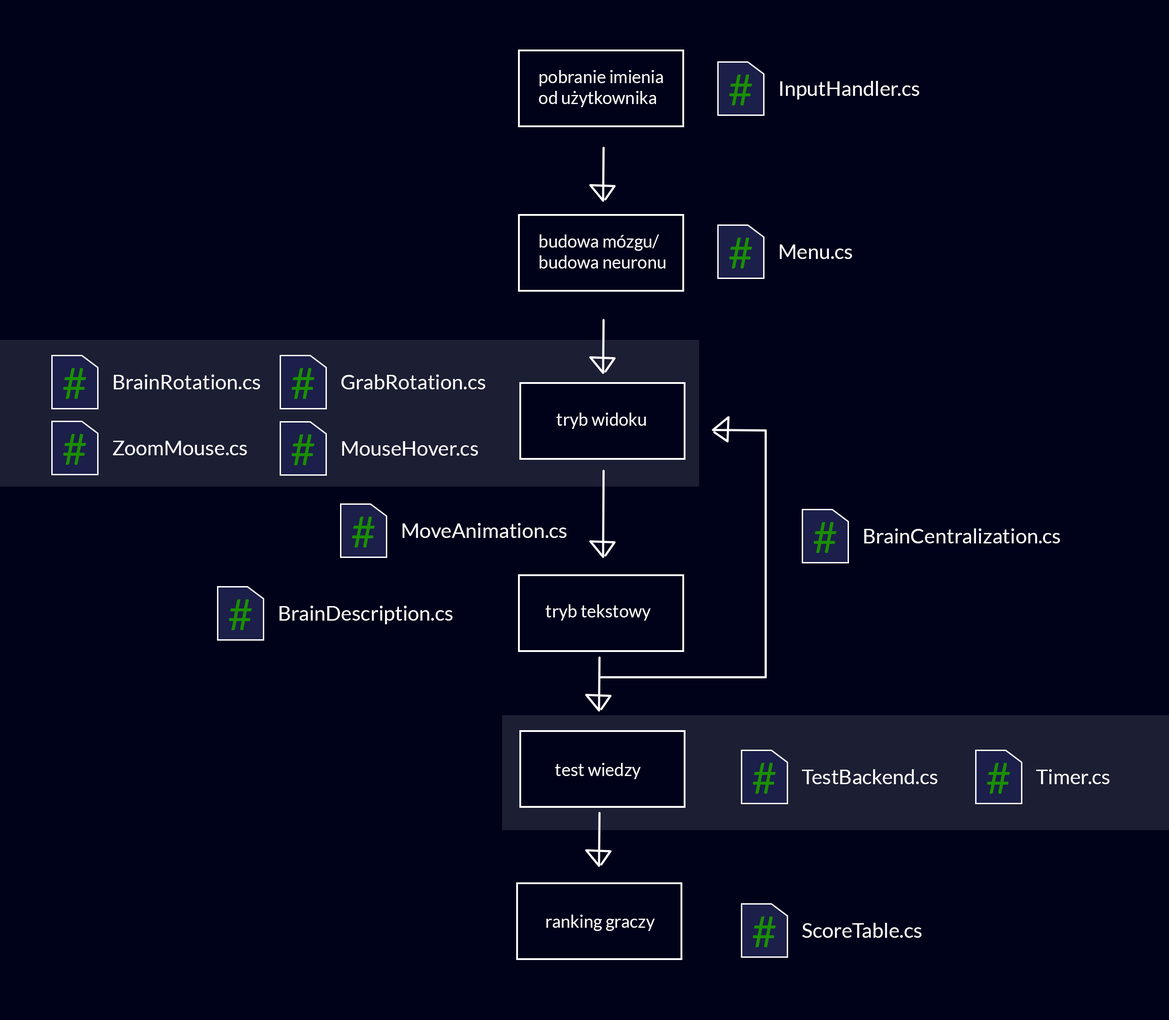
<style>
.page{position:relative;width:1169px;height:1020px;background:#00021a}
.page>*{position:absolute;margin:0}
.t1{font:17.3px "Lato-Regular";color:#ffffff}
.t2{font:43.1px "Lato-Regular";color:#1b8f00}
.t3{font:20.4px "Lato-Regular";color:#ffffff}
</style>
<div class="page">
<p class="t1" style="left:539px;top:70px;width:124px;height:37px">pobranie imienia<br>od użytkownika</p>
<p class="t2" style="left:729px;top:74px;width:24px;height:31px">#</p>
<p class="t3" style="left:780px;top:81px;width:140px;height:18px">InputHandler.cs</p>
<p class="t1" style="left:540px;top:234px;width:126px;height:34px">budowa mózgu/<br>budowa neuronu</p>
<p class="t2" style="left:729px;top:238px;width:24px;height:30px">#</p>
<p class="t3" style="left:780px;top:244px;width:72px;height:15px">Menu.cs</p>
<p class="t2" style="left:63px;top:368px;width:23px;height:31px">#</p>
<p class="t3" style="left:114px;top:374px;width:146px;height:15px">BrainRotation.cs</p>
<p class="t2" style="left:292px;top:368px;width:23px;height:31px">#</p>
<p class="t3" style="left:342px;top:374px;width:144px;height:15px">GrabRotation.cs</p>
<p class="t1" style="left:556px;top:412px;width:90px;height:17px">tryb widoku</p>
<p class="t2" style="left:63px;top:434px;width:23px;height:31px">#</p>
<p class="t2" style="left:292px;top:434px;width:23px;height:31px">#</p>
<p class="t3" style="left:113px;top:441px;width:134px;height:14px">ZoomMouse.cs</p>
<p class="t3" style="left:342px;top:441px;width:136px;height:15px">MouseHover.cs</p>
<p class="t2" style="left:352px;top:516px;width:23px;height:31px">#</p>
<p class="t2" style="left:814px;top:522px;width:23px;height:31px">#</p>
<p class="t3" style="left:402px;top:523px;width:165px;height:15px">MoveAnimation.cs</p>
<p class="t3" style="left:864px;top:528px;width:196px;height:15px">BrainCentralization.cs</p>
<p class="t2" style="left:229px;top:599px;width:23px;height:31px">#</p>
<p class="t3" style="left:279px;top:605px;width:174px;height:19px">BrainDescription.cs</p>
<p class="t1" style="left:545px;top:604px;width:106px;height:16px">tryb tekstowy</p>
<p class="t1" style="left:555px;top:763px;width:86px;height:16px">test wiedzy</p>
<p class="t2" style="left:753px;top:763px;width:23px;height:30px">#</p>
<p class="t3" style="left:802px;top:769px;width:136px;height:15px">TestBackend.cs</p>
<p class="t2" style="left:987px;top:763px;width:24px;height:30px">#</p>
<p class="t3" style="left:1036px;top:769px;width:74px;height:15px">Timer.cs</p>
<p class="t1" style="left:546px;top:914px;width:109px;height:17px">ranking graczy</p>
<p class="t2" style="left:753px;top:916px;width:23px;height:31px">#</p>
<p class="t3" style="left:803px;top:922px;width:119px;height:15px">ScoreTable.cs</p>
</div>
